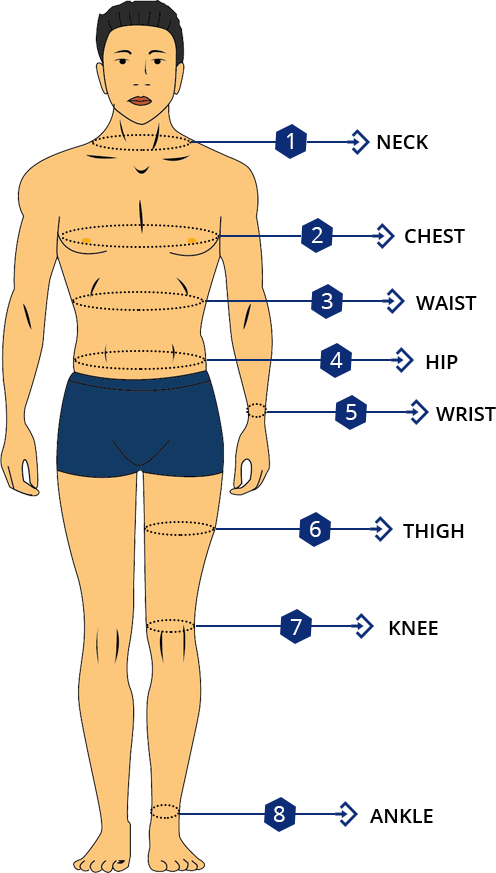
<style>
.page{position:relative;width:496px;height:873px;background:#ffffff}
.page>*{position:absolute;margin:0}
.t1{font:22px "OpenSans";color:#ffffff;text-transform:uppercase}
.t2{font:20px "OpenSans-Semibold";color:#000000;text-transform:uppercase}
</style>
<div class="page">
<p class="t1" style="left:287px;top:133px;width:6px;height:16px">1</p>
<p class="t2" style="left:377px;top:135px;width:52px;height:14px">neck</p>
<p class="t1" style="left:311px;top:227px;width:12px;height:16px">2</p>
<p class="t2" style="left:405px;top:229px;width:60px;height:14px">Chest</p>
<p class="t1" style="left:321px;top:293px;width:12px;height:16px">3</p>
<p class="t2" style="left:416px;top:296px;width:61px;height:14px">waist</p>
<p class="t1" style="left:330px;top:352px;width:13px;height:16px">4</p>
<p class="t2" style="left:426px;top:355px;width:32px;height:14px">hip</p>
<p class="t1" style="left:346px;top:404px;width:11px;height:16px">5</p>
<p class="t2" style="left:436px;top:407px;width:60px;height:14px">Wrist</p>
<p class="t1" style="left:310px;top:521px;width:11px;height:16px">6</p>
<p class="t2" style="left:403px;top:524px;width:61px;height:14px">thigh</p>
<p class="t1" style="left:290px;top:619px;width:12px;height:16px">7</p>
<p class="t2" style="left:389px;top:621px;width:49px;height:14px">knee</p>
<p class="t1" style="left:274px;top:806px;width:11px;height:16px">8</p>
<p class="t2" style="left:370px;top:809px;width:63px;height:14px">ankle</p>
</div>
